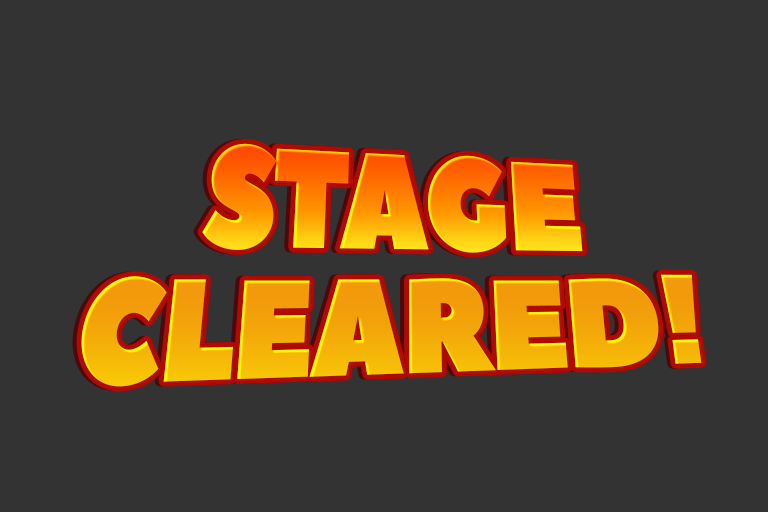
<style>
.page{position:relative;width:768px;height:512px;background:#333333}
.page>*{position:absolute;margin:0}
.t1{font:135px/125px "PeaceSans";letter-spacing:-0.025em;scale:0.89 1}
</style>
<div class="page">
<p class="t1" style="left:77px;top:143px;width:622px;height:243px;text-align:center">STAGE<br>CLEARED!</p>
<p class="t1" style="left:81px;top:143px;width:621px;height:244px;text-align:center">STAGE<br>CLEARED!</p>
</div>
